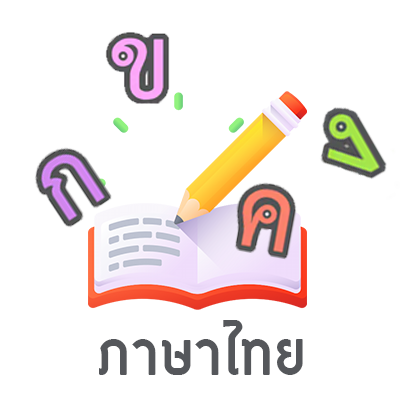
<style>
.page{position:relative;width:400px;height:400px;background:#ffffff}
.page>*{position:absolute;margin:0}
.t1{font:83.3px "Circular-Bold";color:#56585b}
</style>
<div class="page">
<p class="t1" style="left:99px;top:320px;width:204px;height:55px">ภาษาไทย</p>
</div>
